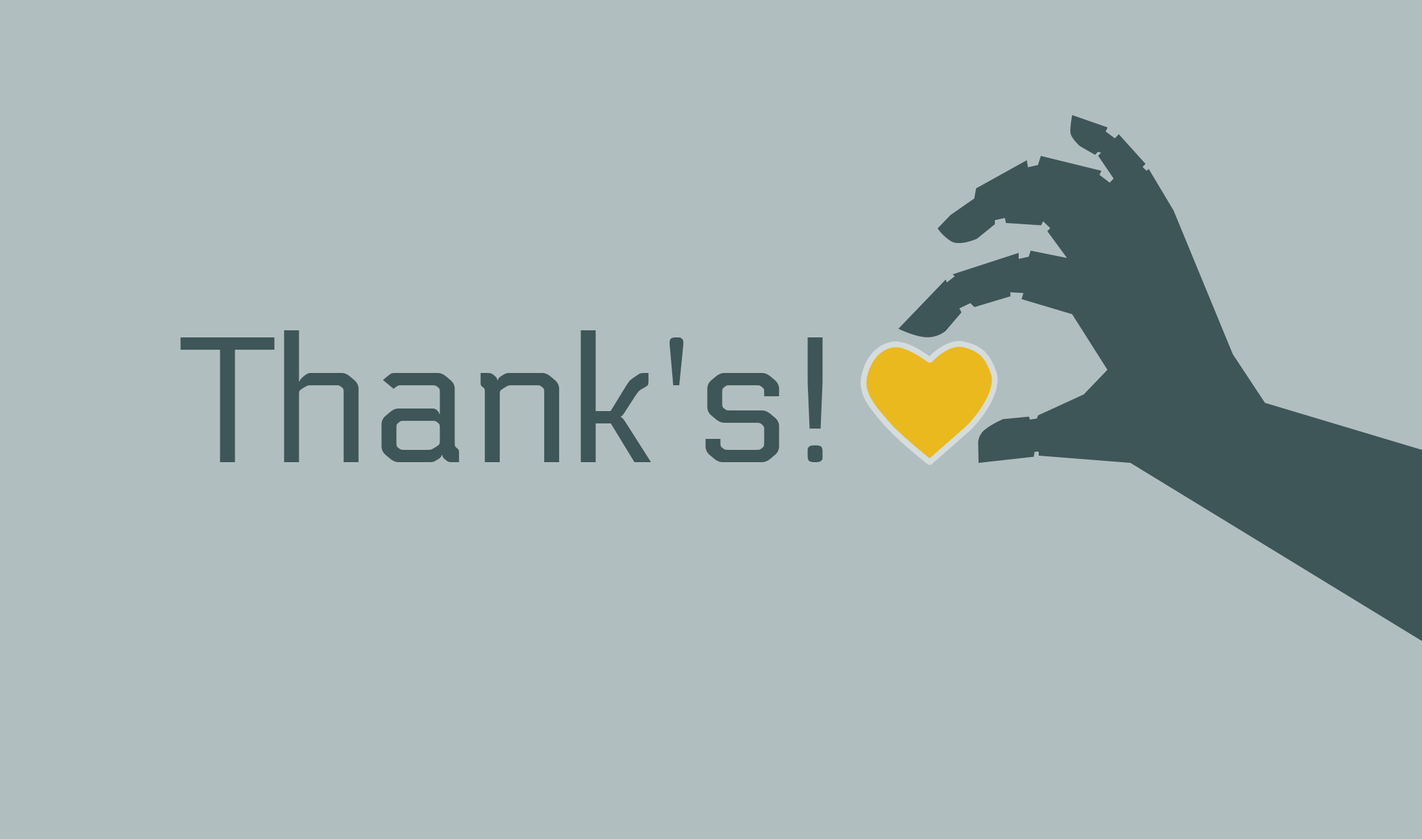
<style>
.page{position:relative;width:1422px;height:839px;background:#b1bebf}
.page>*{position:absolute;margin:0}
.t1{font:177.7px "Electrolize-Regular";color:#3e5658}
</style>
<div class="page">
<p class="t1" style="left:180px;top:330px;width:643px;height:132px">Thank's!</p>
</div>
